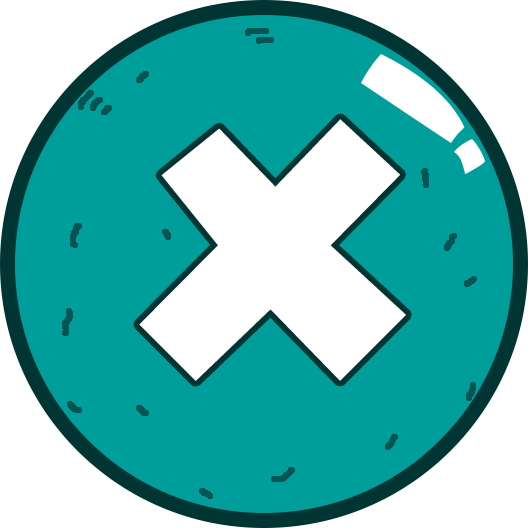
<style>
.page{position:relative;width:528px;height:528px;background:#009e9a}
.page>*{position:absolute;margin:0}
.t1{font:500px "LapsusPro-Bold";color:#ffffff}
</style>
<div class="page">
<p class="t1" style="left:139px;top:119px;width:267px;height:262px">x</p>
</div>
